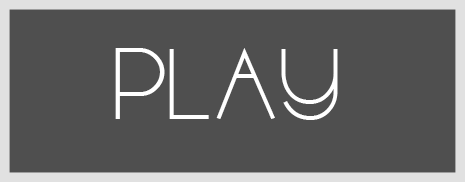
<style>
.page{position:relative;width:465px;height:182px;background:#4f4f4f}
.page>*{position:absolute;margin:0}
.t1{font:100px "Moonbeam";color:#ffffff}
</style>
<div class="page">
<p class="t1" style="left:115px;top:48px;width:223px;height:72px">PLAY</p>
</div>
